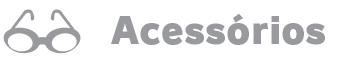
<style>
.page{position:relative;width:352px;height:64px;background:#ffffff}
.page>*{position:absolute;margin:0}
.t1{font:36px "RodinPro-UB";color:#989a9d}
</style>
<div class="page">
<p class="t1" style="left:111px;top:13px;width:214px;height:32px">Acessórios</p>
</div>
